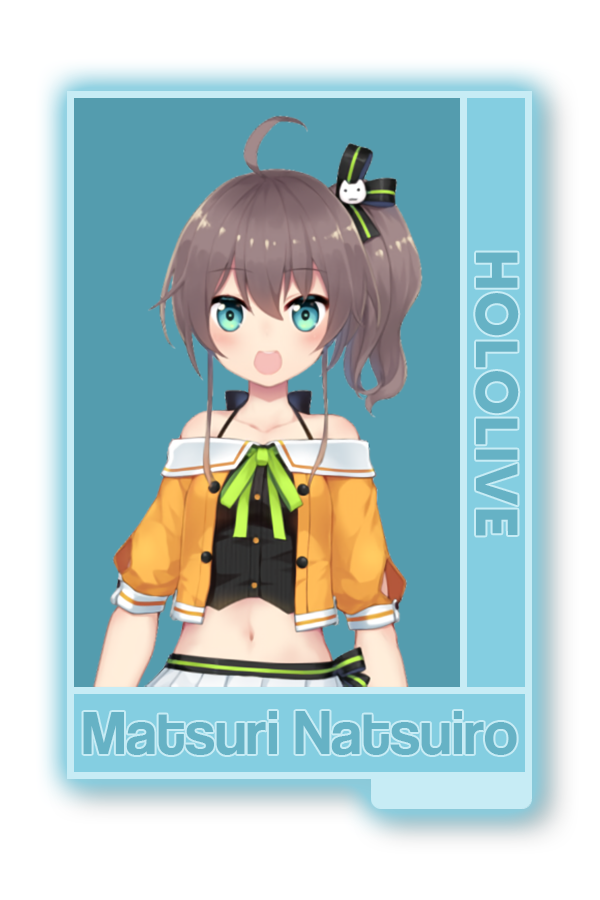
<style>
.page{position:relative;width:600px;height:900px;background:#ffffff}
.page>*{position:absolute;margin:0}
.t1{font:59.2px "MADETOMMY-Bold";color:#66b2c5}
.t2{font:63px "CoolveticaRg-Regular";color:#66b2c5}
</style>
<div class="page">
<p class="t1" style="left:475px;top:252px;width:44px;height:284px;rotate:90deg">HOLOLIVE</p>
<p class="t2" style="left:83px;top:711px;width:434px;height:44px">Matsuri Natsuiro</p>
</div>
